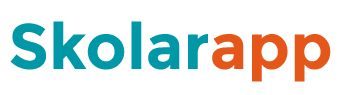
<style>
.page{position:relative;width:340px;height:95px;background:#ffffff}
.page>*{position:absolute;margin:0}
.t1{font:64px "Montserrat-Bold";color:#0097a7}
.t2{font:64px "Montserrat-Bold";color:#e45719}
</style>
<div class="page">
<p class="t1" style="left:10px;top:21px;width:321px;height:61px">Skolar<span class="t2">app</span></p>
</div>
